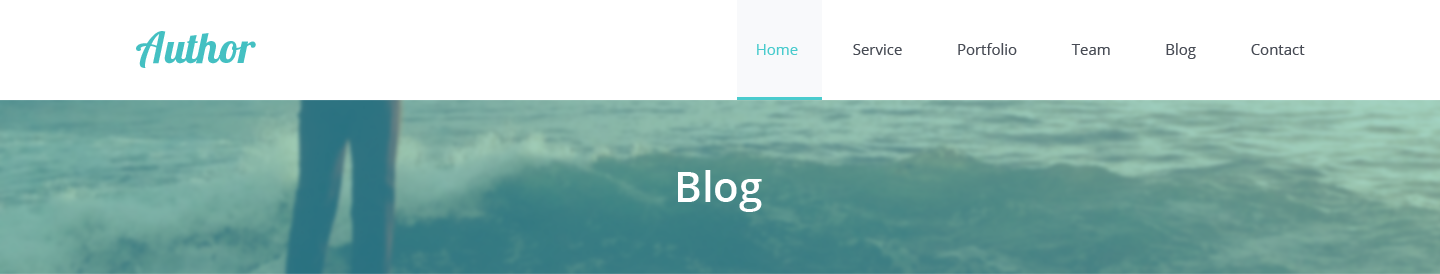
<style>
.page{position:relative;width:1440px;height:274px;background:#ffffff}
.page>*{position:absolute;margin:0}
.t1{font:43px "Lobster1.4";color:#44c0c2}
.t2{font:15px "OpenSans";color:#484c55}
.t3{font:15px "OpenSans";color:#49cbcd}
.t4{font:42px "OpenSans-Semibold";color:#ffffff}
</style>
<div class="page">
<p class="t1" style="left:136px;top:31px;width:120px;height:37px">Author</p>
<p class="t2" style="left:757px;top:43px;width:548px;height:16px"><span class="t3">Home              </span>Service              Portfolio              Team              Blog              Contact</p>
<p class="t4" style="left:678px;top:170px;width:84px;height:42px">Blog</p>
</div>
